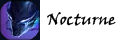
<style>
.page{position:relative;width:140px;height:40px;background:#ffffff}
.page>*{position:absolute;margin:0}
.t1{font:12px "VinerHandITC";color:#000000}
</style>
<div class="page">
<p class="t1" style="left:47px;top:12px;width:69px;height:14px">Nocturne</p>
</div>
